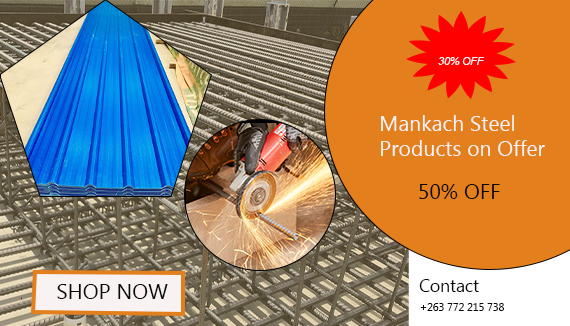
<style>
.page{position:relative;width:570px;height:326px;background:#e37f1d}
.page>*{position:absolute;margin:0}
.t1{font:10.6px "Arial-ItalicMT";color:#f7f1f1}
.t2{font:21.2px "MicrosoftNewTaiLue";color:#f8f2f2}
.t3{font:21.2px "MicrosoftNewTaiLue";color:#0a0909}
.t4{font:17.5px "MicrosoftNewTaiLue";color:#0a0909}
.t5{font:10.6px "MicrosoftNewTaiLue";color:#0a0909}
</style>
<div class="page">
<p class="t1" style="left:438px;top:57px;width:47px;height:8px">30% OFF</p>
<p class="t2" style="left:381px;top:115px;width:164px;height:41px">Mankach Steel<br>Products on Offer</p>
<p class="t3" style="left:419px;top:184px;width:81px;height:15px">50% OFF</p>
<p class="t4" style="left:419px;top:279px;width:60px;height:13px">Contact</p>
<p class="t3" style="left:57px;top:284px;width:111px;height:15px">SHOP NOW</p>
<p class="t5" style="left:420px;top:303px;width:84px;height:8px">+263 772 215 738</p>
</div>
